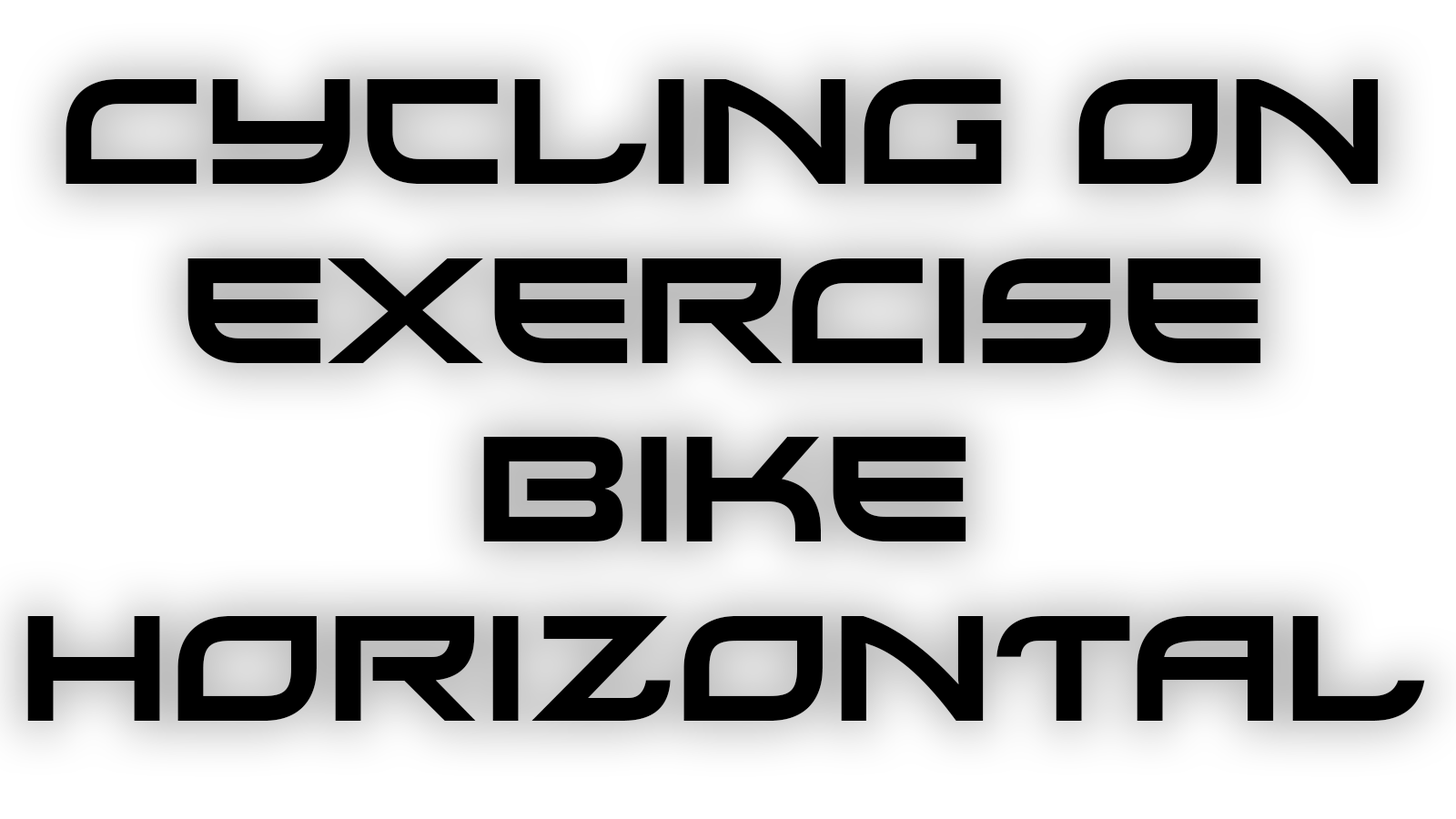
<style>
.page{position:relative;width:1456px;height:819px;background:#ffffff}
.page>*{position:absolute;margin:0}
.t1{font:149.1px "Xirod-Regular";color:#000000}
</style>
<div class="page">
<p class="t1" style="left:27px;top:79px;width:1398px;height:642px;text-align:center">Cycling On<br>Exercise<br>Bike<br>Horizontal</p>
</div>
